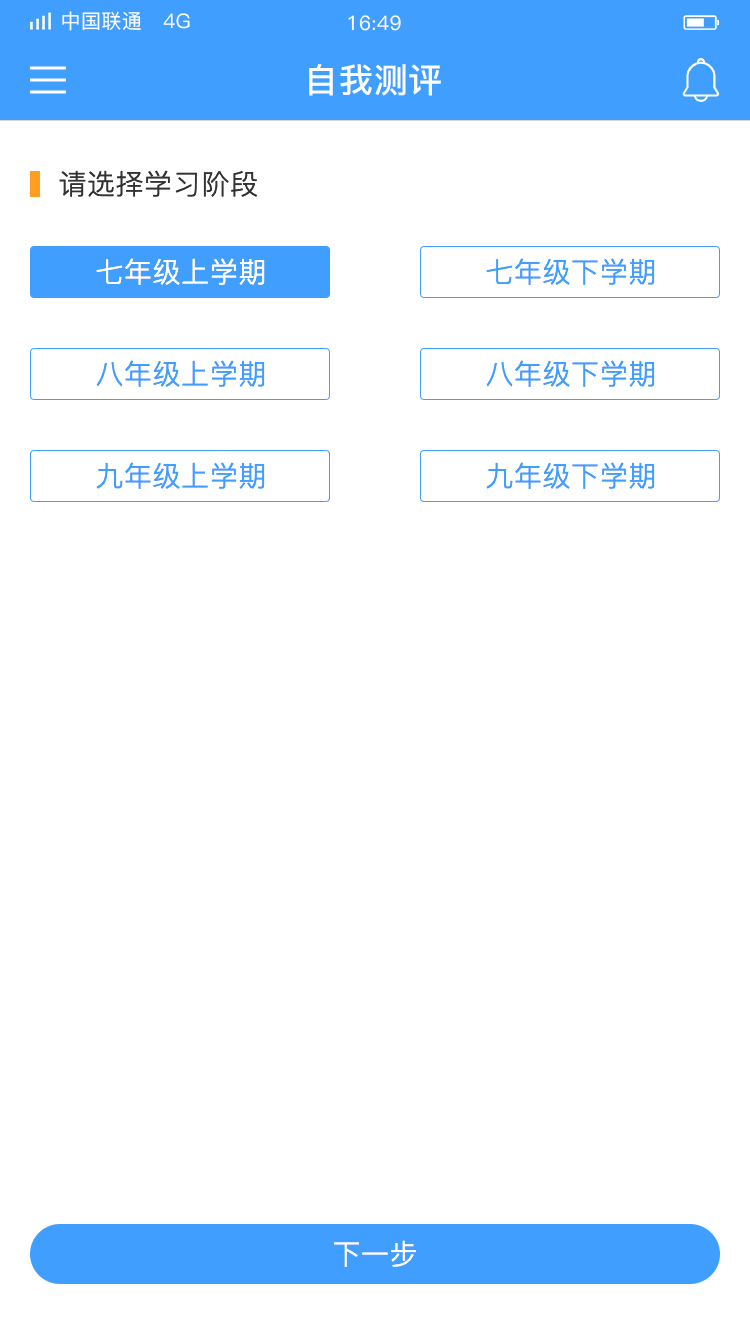
<style>
.page{position:relative;width:750px;height:1334px;background:#ffffff}
.page>*{position:absolute;margin:0}
.t1{font:20px "PingFang-SC-Medium";letter-spacing:0.02em;color:#ffffff}
.t2{font:34px "PingFang-SC-Bold";letter-spacing:0.02em;color:#ffffff}
.t3{font:28px "PingFang-SC-Regular";letter-spacing:0.02em;color:#333333}
.t4{font:28px "PingFang-SC-Regular";letter-spacing:0.02em;color:#ffffff}
.t5{font:28px "PingFang-SC-Regular";letter-spacing:0.02em;color:#409eff}
</style>
<div class="page">
<p class="t1" style="left:62px;top:11px;width:128px;height:20px">中国联通   4G</p>
<p class="t1" style="left:348px;top:15px;width:53px;height:16px">16:49</p>
<p class="t2" style="left:309px;top:64px;width:132px;height:32px">自我测评</p>
<p class="t3" style="left:59px;top:170px;width:198px;height:27px">请选择学习阶段</p>
<p class="t4" style="left:96px;top:258px;width:169px;height:27px">七年级上学期</p>
<p class="t5" style="left:486px;top:258px;width:169px;height:27px">七年级下学期</p>
<p class="t5" style="left:96px;top:360px;width:169px;height:27px">八年级上学期</p>
<p class="t5" style="left:486px;top:360px;width:169px;height:27px">八年级下学期</p>
<p class="t5" style="left:96px;top:462px;width:169px;height:27px">九年级上学期</p>
<p class="t5" style="left:486px;top:462px;width:169px;height:27px">九年级下学期</p>
<p class="t4" style="left:333px;top:1240px;width:83px;height:27px">下一步</p>
</div>
